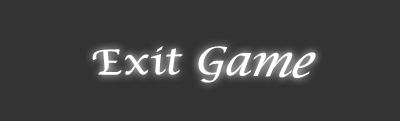
<style>
.page{position:relative;width:400px;height:121px;background:#333333}
.page>*{position:absolute;margin:0}
.t1{font:39.5px "LucidaCalligraphy-Italic";color:#ffffff}
</style>
<div class="page">
<p class="t1" style="left:92px;top:46px;width:224px;height:37px">Exit Game</p>
</div>
